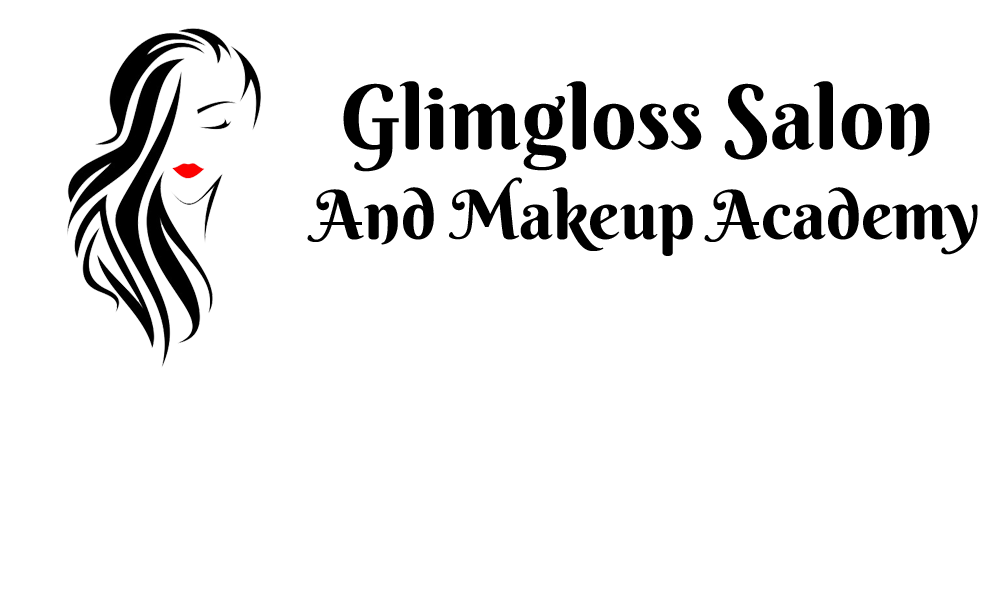
<style>
.page{position:relative;width:1000px;height:600px;background:#ffffff}
.page>*{position:absolute;margin:0}
.t1{font:89.3px "BerkshireSwash-Regular";color:#000000}
.t2{font:68px "BerkshireSwash-Regular";color:#000000}
</style>
<div class="page">
<p class="t1" style="left:343px;top:81px;width:587px;height:91px">Glimgloss Salon</p>
<p class="t2" style="left:307px;top:177px;width:671px;height:79px">And Makeup Academy</p>
</div>
